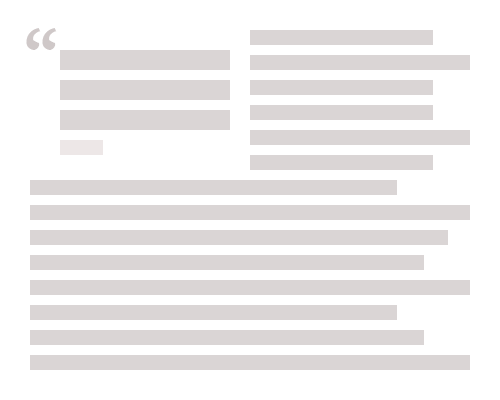
<style>
.page{position:relative;width:500px;height:400px;background:#ffffff}
.page>*{position:absolute;margin:0}
.t1{font:88.3px "PTSerif-Regular";color:#cfc8c8}
</style>
<div class="page">
<p class="t1" style="left:26px;top:28px;width:31px;height:22px">“</p>
</div>
